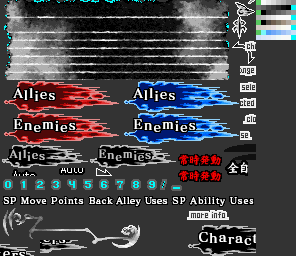
<style>
.page{position:relative;width:296px;height:256px;background:#333333}
.page>*{position:absolute;margin:0}
.t1{font:13px "MatisseVPro-DB";letter-spacing:0.1em;color:#ffffff}
.t2{font:11px "MatisseVPro-DB";letter-spacing:0.1em;color:#c0c0c0}
.t3{font:9px "MatisseVPro-DB";letter-spacing:0.075em;color:#ffffff}
.t4{font:8.1px "MatisseVPro-DB";letter-spacing:0.075em;color:#ffffff;scale:1.11 1}
.t5{font:9px "MatisseVPro-DB";letter-spacing:0.05em;color:#ffffff}
.t6{font:9px "MatisseVPro-DB";letter-spacing:0.1em;color:#ffffff}
</style>
<div class="page">
<p class="t1" style="left:13px;top:88px;width:42px;height:13px">Allies</p>
<p class="t1" style="left:133px;top:88px;width:42px;height:13px">Allies</p>
<p class="t1" style="left:13px;top:119px;width:63px;height:13px">Enemies</p>
<p class="t1" style="left:133px;top:119px;width:63px;height:13px">Enemies</p>
<p class="t2" style="left:9px;top:149px;width:36px;height:12px">Allies</p>
<p class="t2" style="left:98px;top:149px;width:53px;height:12px">Enemies</p>
<p class="t3" style="left:3px;top:197px;width:81px;height:7px">SP Mo<span class="t4">v</span>e Points</p>
<p class="t5" style="left:89px;top:197px;width:79px;height:9px">Back Alley Uses</p>
<p class="t6" style="left:172px;top:197px;width:82px;height:9px">SP Ability Uses</p>
</div>
